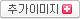
<style>
.page{position:relative;width:80px;height:19px}
.page>*{position:absolute;margin:0}
.t1{font:12px "morris9";color:#4f4f4f}
</style>
<div class="page">
<p class="t1" style="left:8px;top:4px;width:50px;height:10px">추가이미지</p>
</div>
